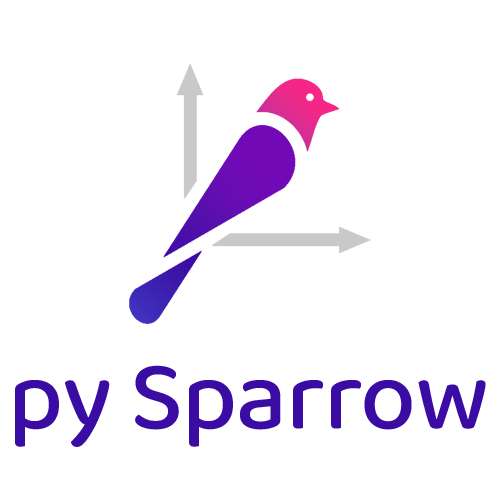
<style>
.page{position:relative;width:500px;height:500px;background:#ffffff}
.page>*{position:absolute;margin:0}
.t1{font:100px "BalooBhai2-Medium";letter-spacing:-0.01em;color:#3a0ca3}
</style>
<div class="page">
<p class="t1" style="left:15px;top:365px;width:471px;height:82px">py Sparrow</p>
</div>
